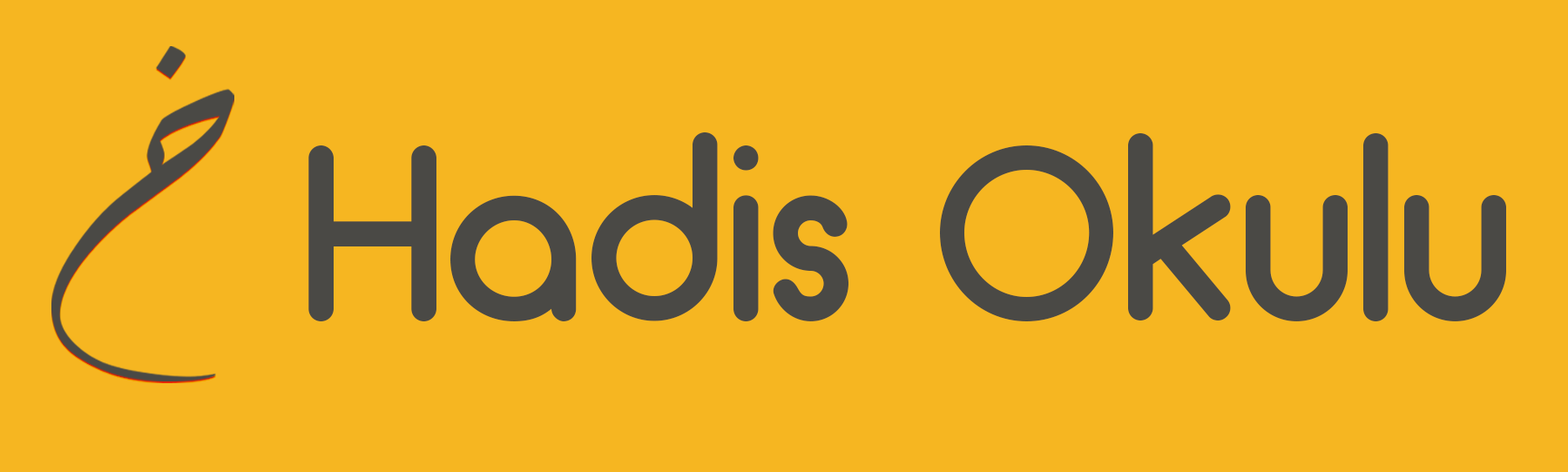
<style>
.page{position:relative;width:1568px;height:472px;background:#f6b621}
.page>*{position:absolute;margin:0}
.t1{font:251.5px "Arciform";color:#4a4945}
</style>
<div class="page">
<p class="t1" style="left:308px;top:132px;width:1198px;height:189px">Hadis Okulu</p>
</div>
